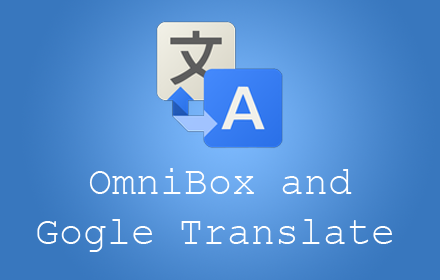
<style>
.page{position:relative;width:440px;height:280px}
.page>*{position:absolute;margin:0}
.t1{font:40px "CourierNewPSMT";color:#ffffff}
</style>
<div class="page">
<p class="t1" style="left:89px;top:168px;width:263px;height:26px">OmniBox and</p>
<p class="t1" style="left:37px;top:219px;width:355px;height:33px">Gogle Translate</p>
</div>
